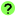
<style>
.page{position:relative;width:16px;height:16px;background:#88ff55}
.page>*{position:absolute;margin:0}
.t1{font:13px "ProFont";color:#000000}
</style>
<div class="page">
<p class="t1" style="left:4px;top:3px;width:8px;height:11px">?</p>
</div>
